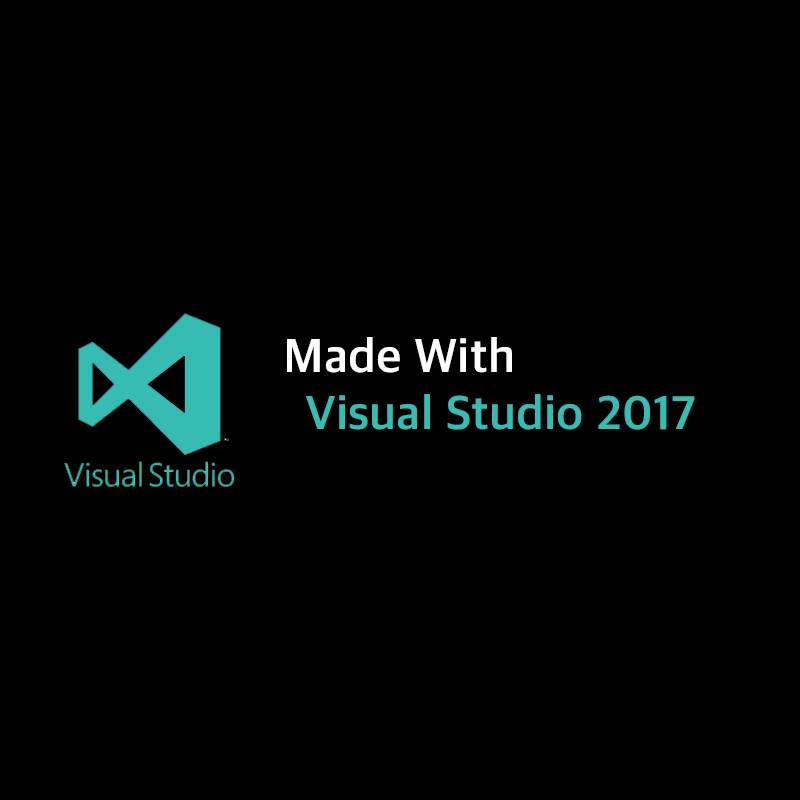
<style>
.page{position:relative;width:800px;height:800px;background:#000000}
.page>*{position:absolute;margin:0}
.t1{font:48px "AppleSDGothicNeoB00";color:#37bcb3}
.t2{font:48px "AppleSDGothicNeoB00";color:#ffffff}
</style>
<div class="page">
<p class="t1" style="left:287px;top:337px;width:408px;height:93px;text-align:center"><span class="t2">Made With   <br>             </span>Visual Studio 2017</p>
</div>
